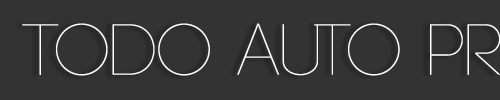
<style>
.page{position:relative;width:500px;height:100px;background:#333333}
.page>*{position:absolute;margin:0}
.t1{font:72px "Code-Light";color:#ffffff}
</style>
<div class="page">
<p class="t1" style="left:22px;top:23px;width:479px;height:53px">Todo Auto PR</p>
</div>
